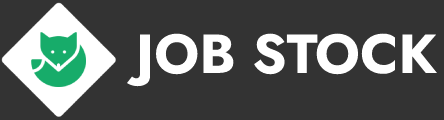
<style>
.page{position:relative;width:444px;height:120px;background:#333333}
.page>*{position:absolute;margin:0}
.t1{font:55px "Jost-Bold";color:#ffffff;text-transform:uppercase}
</style>
<div class="page">
<p class="t1" style="left:126px;top:33px;width:312px;height:54px">Job Stock</p>
</div>
